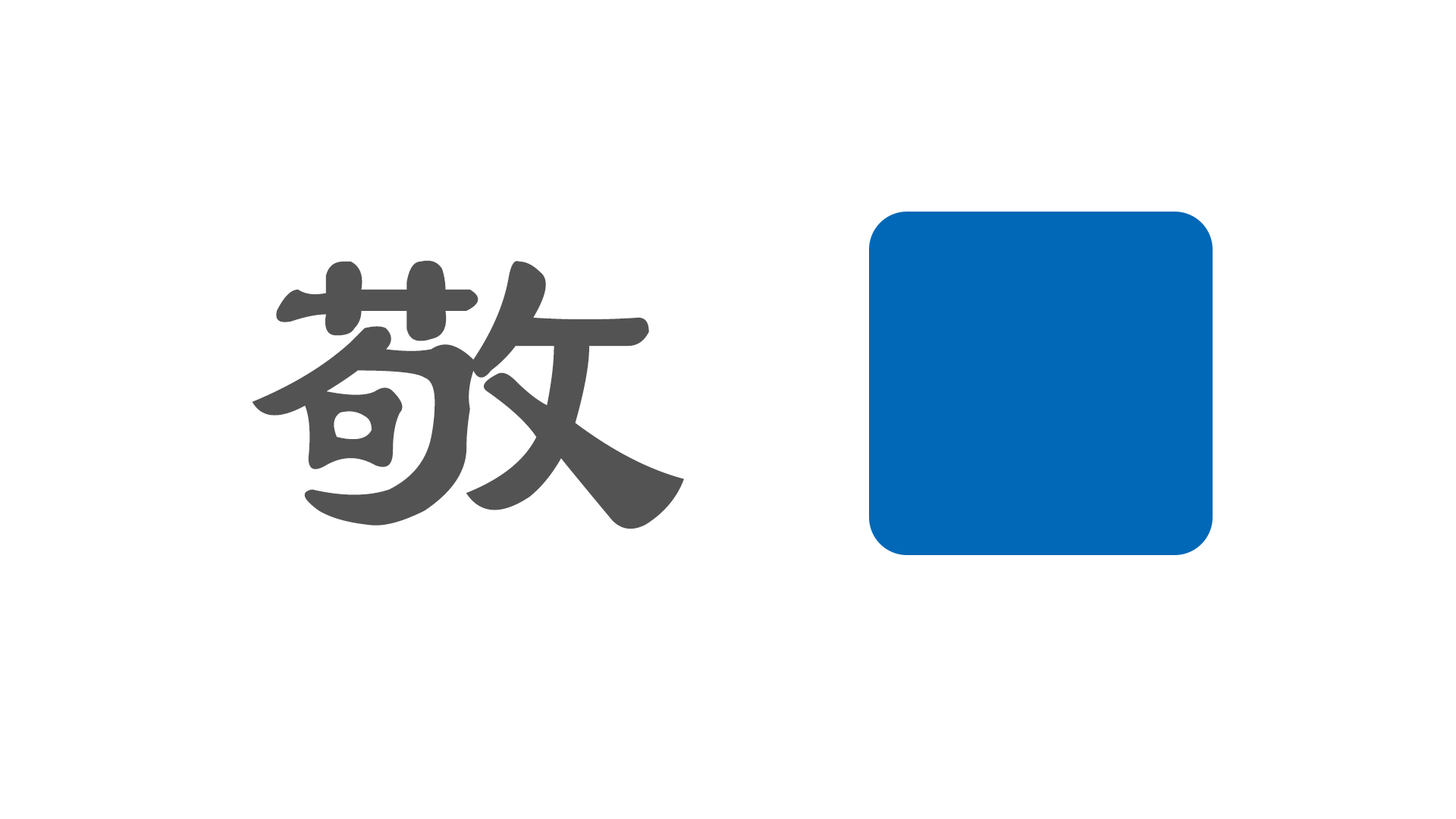
<style>
.page{position:relative;width:1456px;height:819px;background:#ffffff}
.page>*{position:absolute;margin:0}
.t1{font:448.9px "LiSu";color:#535353;font-weight:bold}
</style>
<div class="page">
<p class="t1" style="left:252px;top:260px;width:432px;height:269px">敬</p>
</div>
